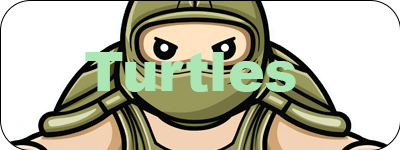
<style>
.page{position:relative;width:400px;height:150px;background:#ffffff}
.page>*{position:absolute;margin:0}
.t1{font:54.7px "Arial-Black";color:#aae7b4}
</style>
<div class="page">
<p class="t1" style="left:85px;top:52px;width:211px;height:40px">Turtles</p>
</div>
